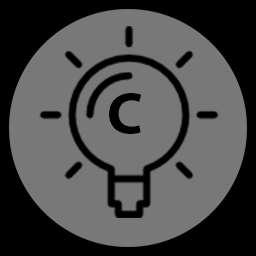
<style>
.page{position:relative;width:256px;height:256px;background:#787878}
.page>*{position:absolute;margin:0}
.t1{font:60px "MyriadPro-Bold";color:#000000}
</style>
<div class="page">
<p class="t1" style="left:109px;top:93px;width:33px;height:41px">C</p>
</div>
